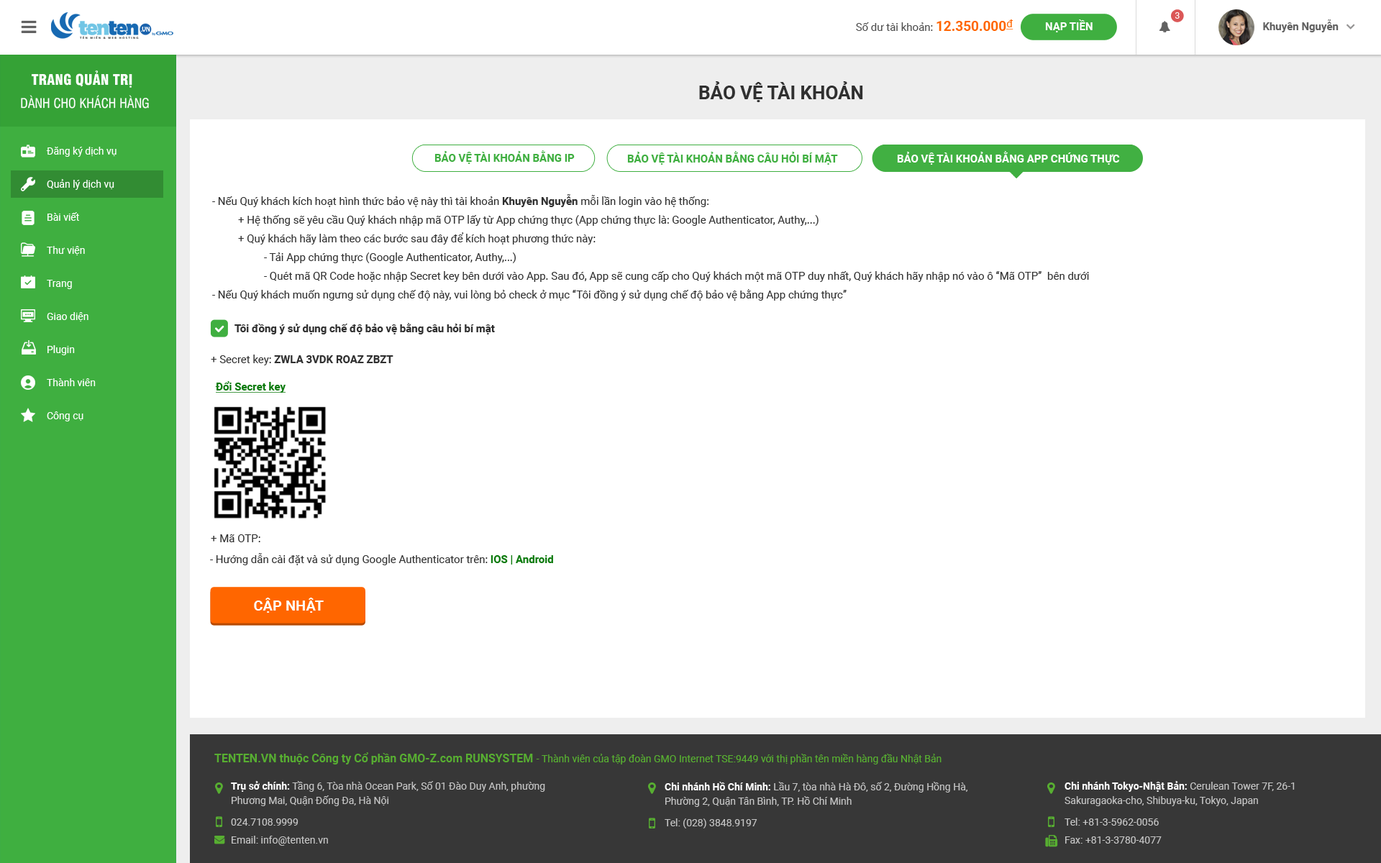
<style>
.page{position:relative;width:1381px;height:863px;background:#ffffff}
.page>*{position:absolute;margin:0}
.t1{font:8.6px "Roboto-Regular";color:#ffffff;text-transform:uppercase}
.t2{font:10.8px "Roboto-Regular";color:#4e4e4e}
.t3{font:13.7px "Roboto-Bold";color:#ff6600}
.t4{font:10.8px "Roboto-Regular";color:#ff6600;text-decoration:underline}
.t5{font:10.8px "Roboto-Bold";color:#ffffff}
.t6{font:10.8px "Roboto-Bold";color:#616161}
.t7{font:14.4px "UTM-Swiss-721-Black-Condensed";color:#ffffff;text-transform:uppercase}
.t8{font:18.7px "Roboto-Bold";color:#303030;text-transform:uppercase}
.t9{font:12.9px "UTM-Swiss-Condensed";color:#ffffff;text-transform:uppercase}
.t10{font:10.1px/33.1px "Roboto-Regular";color:#ffffff}
.t11{font:10.8px "Roboto-Bold";color:#3faf40;text-transform:uppercase}
.t12{font:10.8px "Roboto-Bold";color:#ffffff;text-transform:uppercase}
.t13{font:10.8px/18.7px "Roboto-Regular";color:#303030}
.t14{font:10.8px/18.7px "Roboto-Bold";color:#303030}
.t15{font:10.8px "Roboto-Bold";color:#303030}
.t16{font:10.8px "Roboto-Regular";color:#303030}
.t17{font:10.8px "Roboto-Bold";color:#0e7b0f;text-decoration:underline}
.t18{font:10.8px "Roboto-Bold";color:#0e7b0f}
.t19{font:14.4px "Roboto-Bold";color:#ffffff;text-transform:uppercase}
.t20{font:10.1px "Roboto-Regular";color:#57ae31}
.t21{font:11.5px "Roboto-Bold";color:#57ae31}
.t22{font:10.1px/14.4px "Roboto-Regular";color:#c4c4c4}
.t23{font:10.1px/14.4px "Roboto-Bold";color:#ffffff}
.t24{font:10.1px/21.6px "Roboto-Regular";color:#c4c4c4}
.t25{font:10.1px/18px "Roboto-Regular";color:#c4c4c4}
</style>
<div class="page">
<p class="t1" style="left:1175px;top:12px;width:5px;height:7px">3</p>
<p class="t2" style="left:856px;top:19px;width:158px;height:12px">Số dư tài khoản: <span class="t3">12.350.000</span><span class="t4">đ</span></p>
<p class="t5" style="left:1045px;top:19px;width:48px;height:13px">NẠP TIỀN</p>
<p class="t6" style="left:1263px;top:19px;width:76px;height:13px">Khuyên Nguyễn</p>
<p class="t7" style="left:32px;top:71px;width:100px;height:17px">Trang quản trị</p>
<p class="t8" style="left:699px;top:81px;width:164px;height:21px">bảo vệ tài khoản</p>
<p class="t9" style="left:21px;top:95px;width:128px;height:14px">Dành cho Khách hàng</p>
<p class="t10" style="left:46px;top:147px;width:71px;height:275px">Đăng ký dịch vụ<br>Quản lý dịch vụ<br>Bài viết<br>Thư viện<br>Trang<br>Giao diện<br>Plugin<br>Thành viên<br>Công cụ</p>
<p class="t11" style="left:435px;top:150px;width:140px;height:14px">bảo vệ tài khoản bằng ip</p>
<p class="t11" style="left:627px;top:151px;width:211px;height:14px">bảo vệ tài khoản bằng câu hỏi bí mật</p>
<p class="t12" style="left:897px;top:151px;width:223px;height:14px">bảo vệ tài khoản bằng app chứng thực</p>
<p class="t13" style="left:212px;top:194px;width:877px;height:107px">- Nếu Quý khách kích hoạt hình thức bảo vệ này thì tài khoản <span class="t14">Khuyên Nguyễn</span> mỗi lần login vào hệ thống:<br> + Hệ thống sẽ yêu cầu Quý khách nhập mã OTP lấy từ App chứng thực (App chứng thực là: Google Authenticator, Authy,...)<br> + Quý khách hãy làm theo các bước sau đây để kích hoạt phương thức này:<br>  - Tải App chứng thực (Google Authenticator, Authy,...)<br>  - Quét mã QR Code hoặc nhập Secret key bên dưới vào App. Sau đó, App sẽ cung cấp cho Quý khách một mã OTP duy nhất, Quý khách hãy nhập nó vào ô “Mã OTP”  bên dưới<br>- Nếu Quý khách muốn ngưng sử dụng chế độ này, vui lòng bỏ check ở mục “Tôi đồng ý sử dụng chế độ bảo vệ bằng App chứng thực”</p>
<p class="t15" style="left:235px;top:323px;width:260px;height:12px">Tôi đồng ý sử dụng chế độ bảo vệ bằng câu hỏi bí mật</p>
<p class="t15" style="left:211px;top:355px;width:183px;height:10px"><span class="t16">+ Secret key: </span>ZWLA 3VDK ROAZ ZBZT</p>
<p class="t17" style="left:215px;top:381px;width:71px;height:12px">Đổi Secret key</p>
<p class="t16" style="left:211px;top:535px;width:49px;height:7px">+ Mã OTP:</p>
<p class="t16" style="left:210px;top:553px;width:343px;height:12px">- Hướng dẫn cài đặt và sử dụng Google Authenticator trên: <span class="t18">IOS | Android</span></p>
<p class="t19" style="left:254px;top:598px;width:70px;height:15px">cập nhật</p>
<p class="t20" style="left:214px;top:753px;width:728px;height:12px"><span class="t21">TENTEN.VN thuộc Công ty Cổ phần GMO-Z.com RUNSYSTEM </span>- Thành viên của tập đoàn GMO Internet TSE:9449 với thị phần tên miền hàng đầu Nhật Bản</p>
<p class="t22" style="left:231px;top:781px;width:314px;height:65px"><span class="t23">Trụ sở chính:</span> Tầng 6, Tòa nhà Ocean Park, Số 01 Đào Duy Anh, phường Phương Mai, Quận Đống Đa, Hà Nội<br><span class="t24">024.7108.9999<br></span><span class="t25">Email: info@tenten.vn</span></p>
<p class="t22" style="left:665px;top:782px;width:303px;height:47px"><span class="t23">Chi nhánh Hồ Chí Minh: </span>Lầu 7, tòa nhà Hà Đô, số 2, Đường Hồng Hà, Phường 2, Quận Tân Bình, TP. Hồ Chí Minh<br><span class="t24">Tel: (028) 3848.9197</span></p>
<p class="t22" style="left:1065px;top:781px;width:230px;height:63px"><span class="t23">Chi nhánh Tokyo-Nhật Bản:</span> Cerulean Tower 7F, 26-1 Sakuragaoka-cho, Shibuya-ku, Tokyo, Japan <br><span class="t24">Tel: +81-3-5962-0056<br></span><span class="t25">Fax: +81-3-3780-4077</span></p>
</div>
